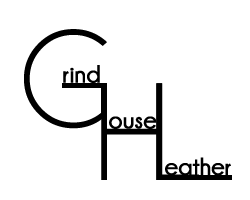
<style>
.page{position:relative;width:250px;height:200px;background:#ffffff}
.page>*{position:absolute;margin:0}
.t1{font:140px "Champagne&Limousines";color:#000000}
.t2{font:25px "Champagne&Limousines-Bold";color:#000000}
</style>
<div class="page">
<p class="t1" style="left:24px;top:29px;width:83px;height:100px">G</p>
<p class="t2" style="left:63px;top:65px;width:37px;height:18px">rind</p>
<p class="t1" style="left:101px;top:83px;width:61px;height:97px">H</p>
<p class="t1" style="left:156px;top:83px;width:43px;height:97px">L</p>
<p class="t2" style="left:109px;top:116px;width:48px;height:13px">ouse</p>
<p class="t2" style="left:165px;top:157px;width:66px;height:19px">eather</p>
</div>
